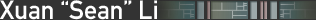
<style>
.page{position:relative;width:316px;height:20px;background:#333333}
.page>*{position:absolute;margin:0}
.t1{font:26px "DIN-1451-Mittelschrift-Regular";color:#ffffff}
</style>
<div class="page">
<p class="t1" style="left:0px;top:0px;width:157px;height:20px">Xuan “Sean” Li</p>
</div>
